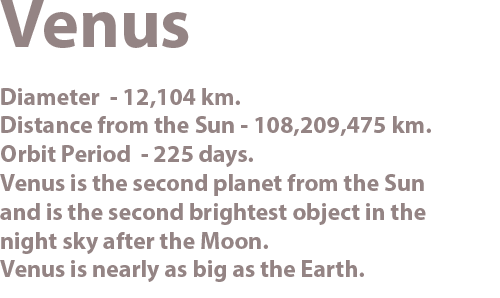
<style>
.page{position:relative;width:500px;height:298px;background:#ffffff}
.page>*{position:absolute;margin:0}
.t1{font:24px "MyriadHebrew-Bold";color:#887777}
.t2{font:70px "MyriadHebrew-Bold";color:#887777}
</style>
<div class="page">
<p class="t1" style="left:0px;top:0px;width:431px;height:282px;text-align:right;opacity:0.9"><span class="t2">Venus<br></span><br>Diameter  - 12,104 km.<br>Distance from the Sun - 108,209,475 km.<br>Orbit Period  - 225 days.<br>Venus is the second planet from the Sun<br>and is the second brightest object in the<br>night sky after the Moon.<br>Venus is nearly as big as the Earth.</p>
</div>
